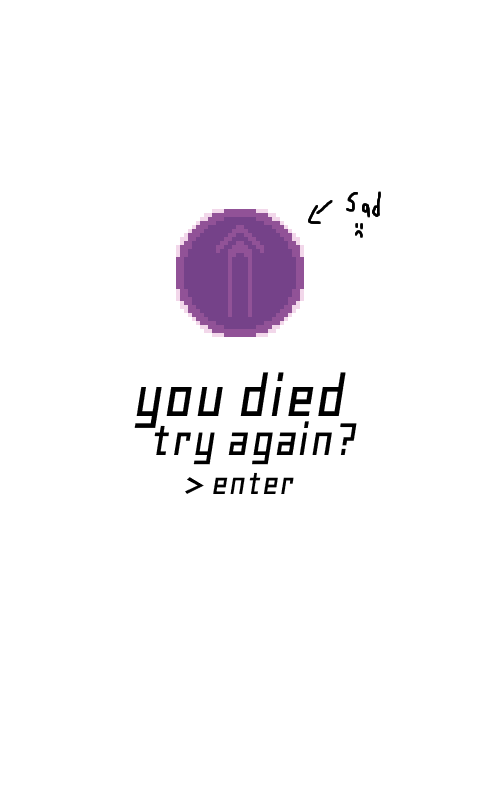
<style>
.page{position:relative;width:480px;height:800px;background:#ffffff}
.page>*{position:absolute;margin:0}
.t1{font:66px "GeoOblique";color:#000000}
.t2{font:51px "GeoOblique";color:#000000}
.t3{font:37px "GeoOblique";color:#000000}
</style>
<div class="page">
<p class="t1" style="left:134px;top:372px;width:212px;height:56px">you died</p>
<p class="t2" style="left:154px;top:421px;width:203px;height:44px">try again?</p>
<p class="t3" style="left:185px;top:472px;width:109px;height:22px">&gt; enter</p>
</div>
